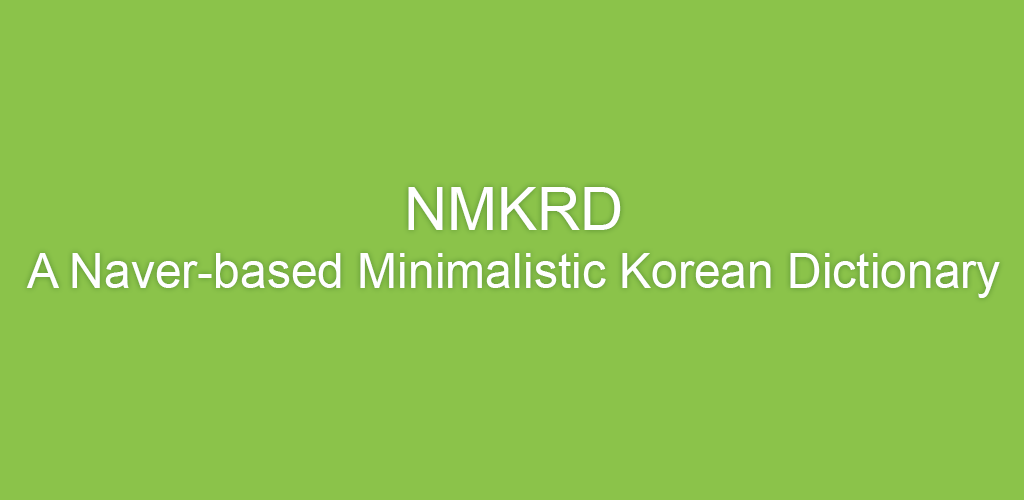
<style>
.page{position:relative;width:1024px;height:500px;background:#8bc34a}
.page>*{position:absolute;margin:0}
.t1{font:48px "ArialMT";color:#ffffff}
.t2{font:60px "ArialMT";color:#ffffff}
</style>
<div class="page">
<p class="t1" style="left:26px;top:187px;width:974px;height:111px;text-align:center"><span class="t2">NMKRD<br></span>A Naver-based Minimalistic Korean Dictionary</p>
</div>
